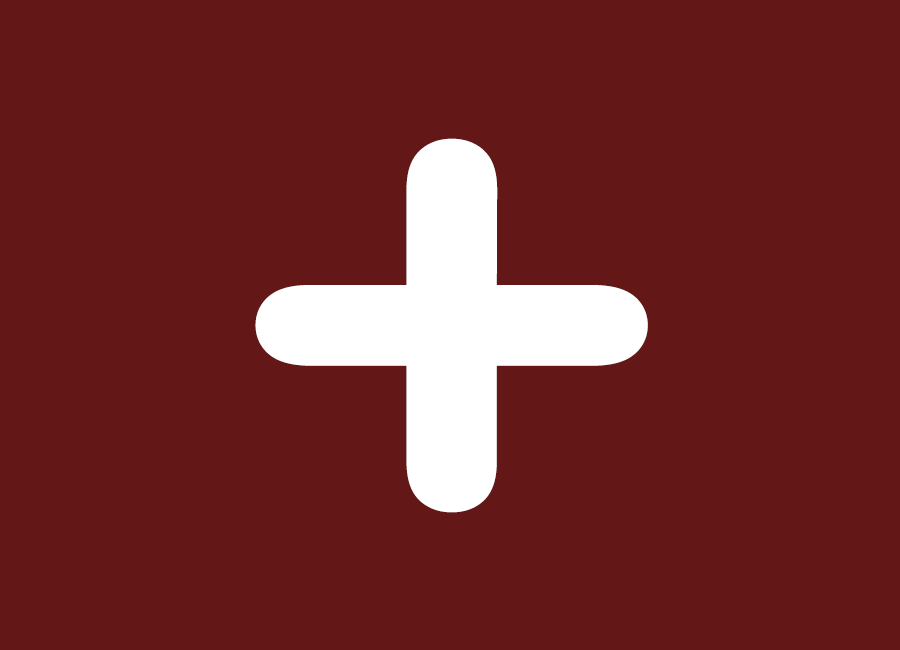
<style>
.page{position:relative;width:900px;height:650px;background:#631717}
.page>*{position:absolute;margin:0}
.t1{font:625px "CourierNewPS-BoldMT";color:#ffffff;font-weight:bold;scale:1.15 1}
</style>
<div class="page">
<p class="t1" style="left:255px;top:138px;width:393px;height:375px">+</p>
</div>
